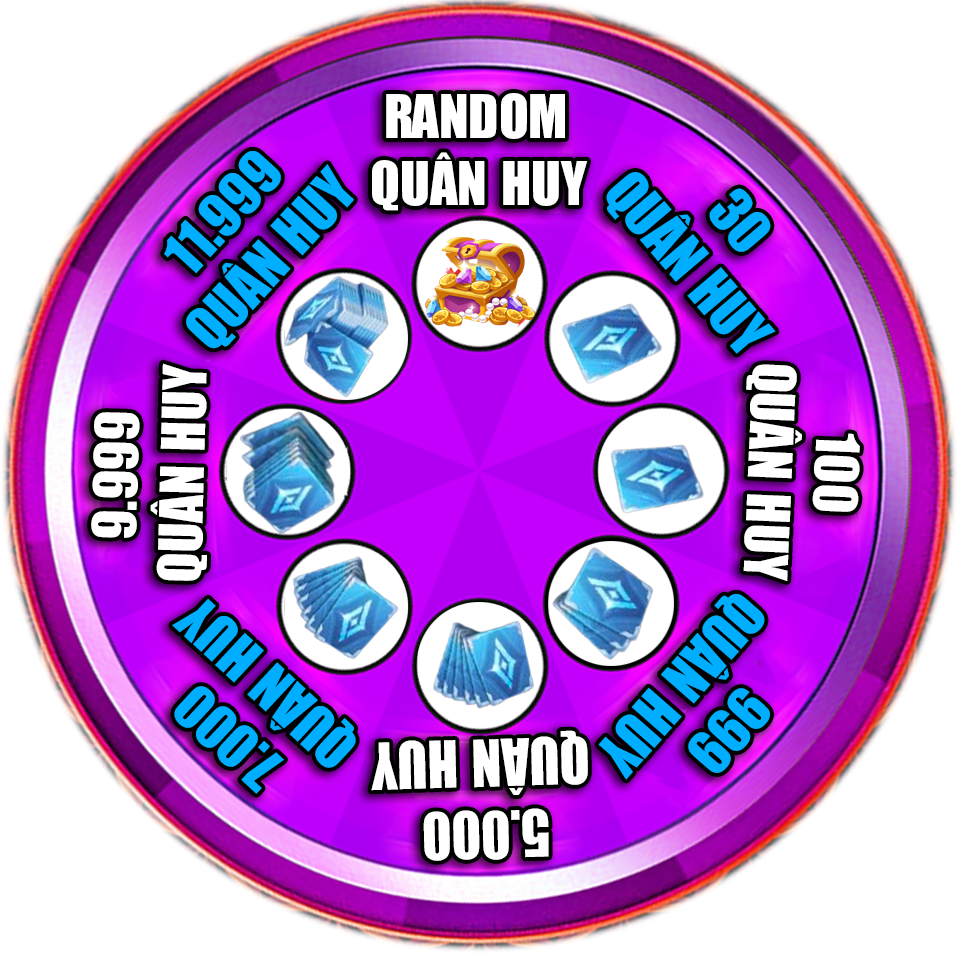
<style>
.page{position:relative;width:960px;height:960px;background:#ffffff}
.page>*{position:absolute;margin:0}
.t1{font:55.7px "UTM-Impact";color:#ffffff}
.t2{font:55.4px "UTM-Impact";color:#00aeff}
.t3{font:55.7px "UTM-Impact";color:#00aeff}
.t4{font:55.4px "UTM-Impact";color:#ffffff}
.t5{font:55.5px "UTM-Impact";color:#ffffff}
.t6{font:55.5px "UTM-Impact";color:#00aeff}
.t7{font:60px "UTM-Impact";color:#ffffff;scale:0.92 1}
</style>
<div class="page">
<p class="t1" style="left:372px;top:93px;width:216px;height:118px">RANDOM <br>QUÂN HUY</p>
<p class="t2" style="left:164px;top:151px;width:190px;height:198px;rotate:-47deg">11.999  <br>QUÂN HUY</p>
<p class="t3" style="left:606px;top:172px;width:170px;height:182px;rotate:49deg">30 <br>QUÂN HUY</p>
<p class="t4" style="left:91px;top:363px;width:116px;height:218px;rotate:-89deg">9.999  <br>QUÂN HUY</p>
<p class="t5" style="left:743px;top:364px;width:117px;height:217px;rotate:93deg">100 <br>QUÂN HUY</p>
<p class="t2" style="left:172px;top:598px;width:184px;height:196px;rotate:-137deg">7.000  <br>QUÂN HUY</p>
<p class="t6" style="left:598px;top:594px;width:172px;height:186px;rotate:131deg">999 <br>QUÂN HUY</p>
<p class="t7" style="left:371px;top:730px;width:217px;height:131px;rotate:178deg">5.000  <br>QUÂN HUY</p>
</div>
